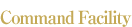
<style>
.page{position:relative;width:132px;height:27px;background:#ffffff}
.page>*{position:absolute;margin:0}
.t1{font:18px "RyuminPro-ExBold";letter-spacing:-0.08em;color:#c4a956;scale:0.97 1}
</style>
<div class="page">
<p class="t1" style="left:0px;top:10px;width:132px;height:17px">Command Facility</p>
</div>
